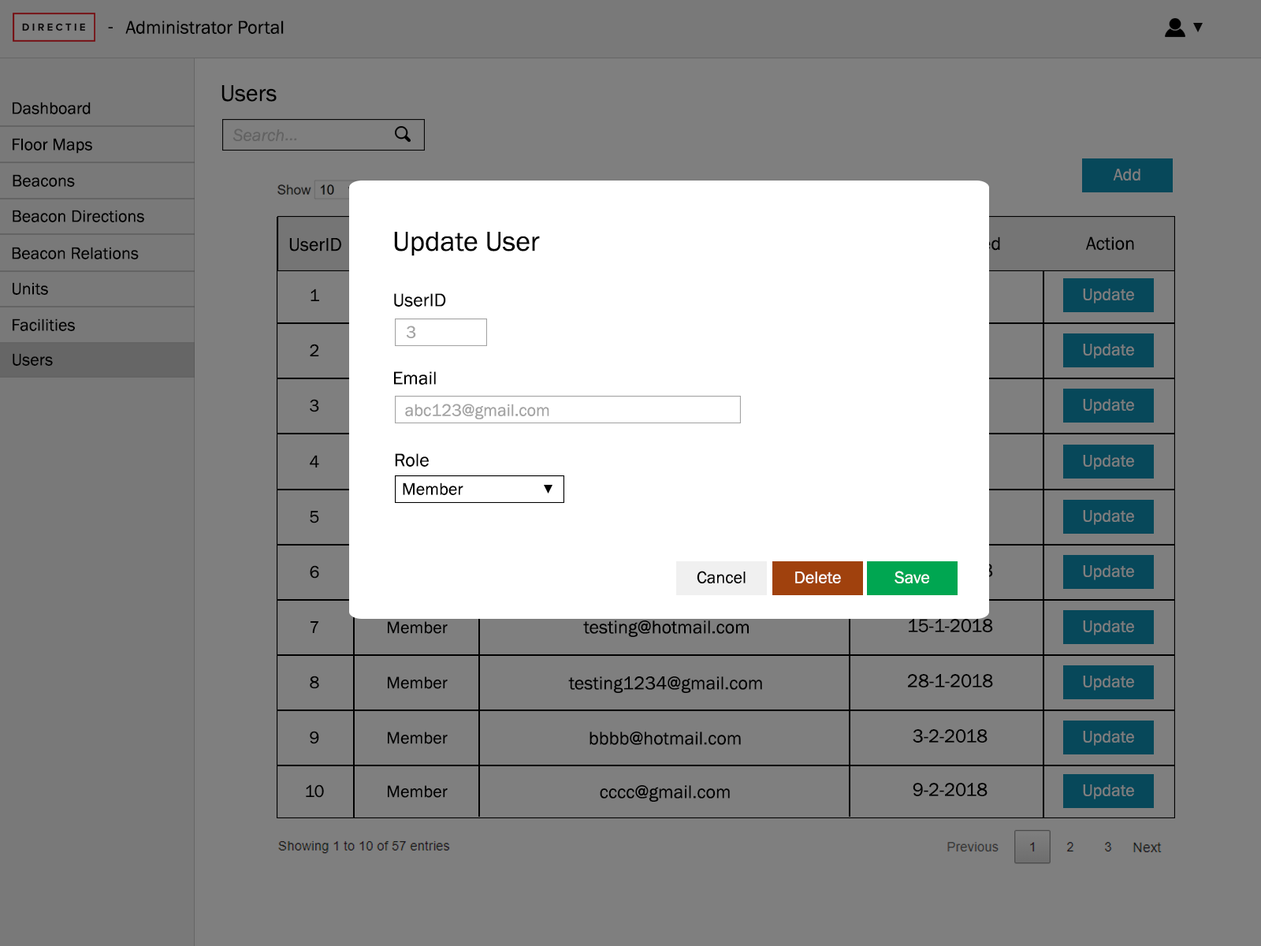
<style>
.page{position:relative;width:1261px;height:946px;background:#7f7f7f}
.page>*{position:absolute;margin:0}
.t1{font:18.9px "FranklinGothic-Book";color:#000000}
.t2{font:23.6px "FranklinGothic-Book";color:#000000}
.t3{font:17.3px "FranklinGothic-Book";color:#000000}
.t4{font:17.3px "FranklinGothic-Book";color:#7f7f7f}
.t5{font:28.4px "FranklinGothic-Book";color:#000000}
.t6{font:17.3px "FranklinGothic-Book";color:#a4a4a4}
.t7{font:17.3px "FranklinGothic-Book";color:#010101}
.t8{font:17.3px "FranklinGothic-Book";color:#fefefe}
</style>
<div class="page">
<p class="t1" style="left:108px;top:27px;width:5px;height:1px">-</p>
<p class="t1" style="left:125px;top:20px;width:159px;height:14px">Administrator Portal</p>
<p class="t2" style="left:221px;top:85px;width:56px;height:17px">Users</p>
<p class="t3" style="left:13px;top:102px;width:78px;height:12px">Dashboard</p>
<p class="t3" style="left:13px;top:138px;width:79px;height:16px">Floor Maps</p>
<p class="t4" style="left:1113px;top:169px;width:27px;height:11px">Add</p>
<p class="t3" style="left:13px;top:174px;width:62px;height:13px">Beacons</p>
<p class="t3" style="left:13px;top:210px;width:131px;height:12px">Beacon Directions</p>
<p class="t5" style="left:394px;top:232px;width:146px;height:24px">Update User</p>
<p class="t1" style="left:289px;top:238px;width:52px;height:13px">UserID</p>
<p class="t1" style="left:1085px;top:236px;width:49px;height:15px">Action</p>
<p class="t3" style="left:12px;top:247px;width:127px;height:12px">Beacon Relations</p>
<p class="t3" style="left:13px;top:282px;width:35px;height:13px">Units</p>
<p class="t3" style="left:311px;top:288px;width:8px;height:13px">1</p>
<p class="t1" style="left:394px;top:293px;width:52px;height:14px">UserID</p>
<p class="t4" style="left:1083px;top:288px;width:51px;height:15px">Update</p>
<p class="t3" style="left:13px;top:318px;width:62px;height:13px">Facilities</p>
<p class="t6" style="left:406px;top:325px;width:10px;height:13px">3</p>
<p class="t3" style="left:13px;top:353px;width:40px;height:13px">Users</p>
<p class="t3" style="left:310px;top:344px;width:9px;height:12px">2</p>
<p class="t4" style="left:1083px;top:344px;width:51px;height:15px">Update</p>
<p class="t1" style="left:394px;top:371px;width:42px;height:14px">Email</p>
<p class="t3" style="left:310px;top:399px;width:9px;height:13px">3</p>
<p class="t4" style="left:1083px;top:399px;width:51px;height:15px">Update</p>
<p class="t6" style="left:405px;top:403px;width:144px;height:16px">abc123@gmail.com</p>
<p class="t3" style="left:310px;top:455px;width:9px;height:12px">4</p>
<p class="t1" style="left:395px;top:453px;width:34px;height:14px">Role</p>
<p class="t4" style="left:1083px;top:455px;width:51px;height:15px">Update</p>
<p class="t3" style="left:403px;top:482px;width:60px;height:13px">Member</p>
<p class="t4" style="left:1083px;top:510px;width:51px;height:15px">Update</p>
<p class="t3" style="left:310px;top:511px;width:9px;height:12px">5</p>
<p class="t3" style="left:310px;top:565px;width:9px;height:13px">6</p>
<p class="t4" style="left:1083px;top:565px;width:51px;height:15px">Update</p>
<p class="t7" style="left:697px;top:571px;width:49px;height:12px">Cancel</p>
<p class="t8" style="left:795px;top:571px;width:46px;height:12px">Delete</p>
<p class="t8" style="left:894px;top:571px;width:35px;height:12px">Save</p>
<p class="t3" style="left:311px;top:621px;width:7px;height:12px">7</p>
<p class="t3" style="left:388px;top:621px;width:60px;height:13px">Member</p>
<p class="t1" style="left:583px;top:620px;width:166px;height:17px">testing@hotmail.com</p>
<p class="t1" style="left:909px;top:619px;width:84px;height:13px">15-1-2018</p>
<p class="t4" style="left:1083px;top:620px;width:51px;height:15px">Update</p>
<p class="t3" style="left:310px;top:675px;width:9px;height:14px">8</p>
<p class="t3" style="left:388px;top:676px;width:60px;height:13px">Member</p>
<p class="t1" style="left:568px;top:676px;width:194px;height:17px">testing1234@gmail.com</p>
<p class="t1" style="left:908px;top:674px;width:85px;height:13px">28-1-2018</p>
<p class="t4" style="left:1083px;top:675px;width:51px;height:15px">Update</p>
<p class="t3" style="left:310px;top:731px;width:9px;height:13px">9</p>
<p class="t3" style="left:388px;top:731px;width:60px;height:13px">Member</p>
<p class="t1" style="left:589px;top:731px;width:152px;height:14px">bbbb@hotmail.com</p>
<p class="t1" style="left:913px;top:729px;width:74px;height:13px">3-2-2018</p>
<p class="t4" style="left:1083px;top:731px;width:51px;height:15px">Update</p>
<p class="t3" style="left:306px;top:784px;width:18px;height:14px">10</p>
<p class="t3" style="left:388px;top:785px;width:60px;height:13px">Member</p>
<p class="t1" style="left:600px;top:785px;width:130px;height:16px">cccc@gmail.com</p>
<p class="t1" style="left:913px;top:783px;width:74px;height:13px">9-2-2018</p>
<p class="t4" style="left:1083px;top:784px;width:51px;height:15px">Update</p>
</div>
